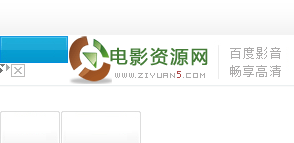
<style>
.page{position:relative;width:294px;height:143px;background:#ffffff}
.page>*{position:absolute;margin:0}
.t1{font:18px "MicrosoftYaHei";letter-spacing:0.1em;color:#437c36;font-weight:bold}
.t2{font:12px/18px "SimSun";letter-spacing:0.1em;color:#acabab}
.t3{font:8px "04b08";letter-spacing:0.1em;color:#acabab}
.t4{font:12px "13pxbus";letter-spacing:0.1em;color:#ae4a4a}
</style>
<div class="page">
<p class="t1" style="left:110px;top:47px;width:98px;height:19px">电影资源网</p>
<p class="t2" style="left:230px;top:47px;width:51px;height:30px">百度影音<br>畅享高清</p>
<p class="t3" style="left:115px;top:71px;width:90px;height:7px">www.ziyuan<span class="t4">5</span>.com</p>
</div>
